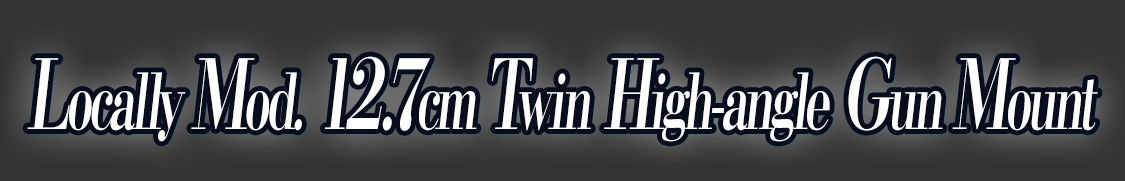
<style>
.page{position:relative;width:1125px;height:181px;background:#333333}
.page>*{position:absolute;margin:0}
.t1{font:76.8px "KochoStd-Heavy";letter-spacing:-0.08em;color:#ffffff;font-style:italic;scale:0.63 1}
.t2{font:96px "KochoStd-Heavy";letter-spacing:-0.08em;color:#ffffff;font-style:italic;scale:0.63 1}
</style>
<div class="page">
<p class="t1" style="left:27px;top:56px;width:1071px;height:86px"><span class="t2">L</span>ocally <span class="t2">M</span>od.<span class="t2"> 12.7</span>cm <span class="t2">T</span>win<span class="t2"> H</span>igh-angle<span class="t2"> G</span>un <span class="t2">M</span>ount</p>
</div>
